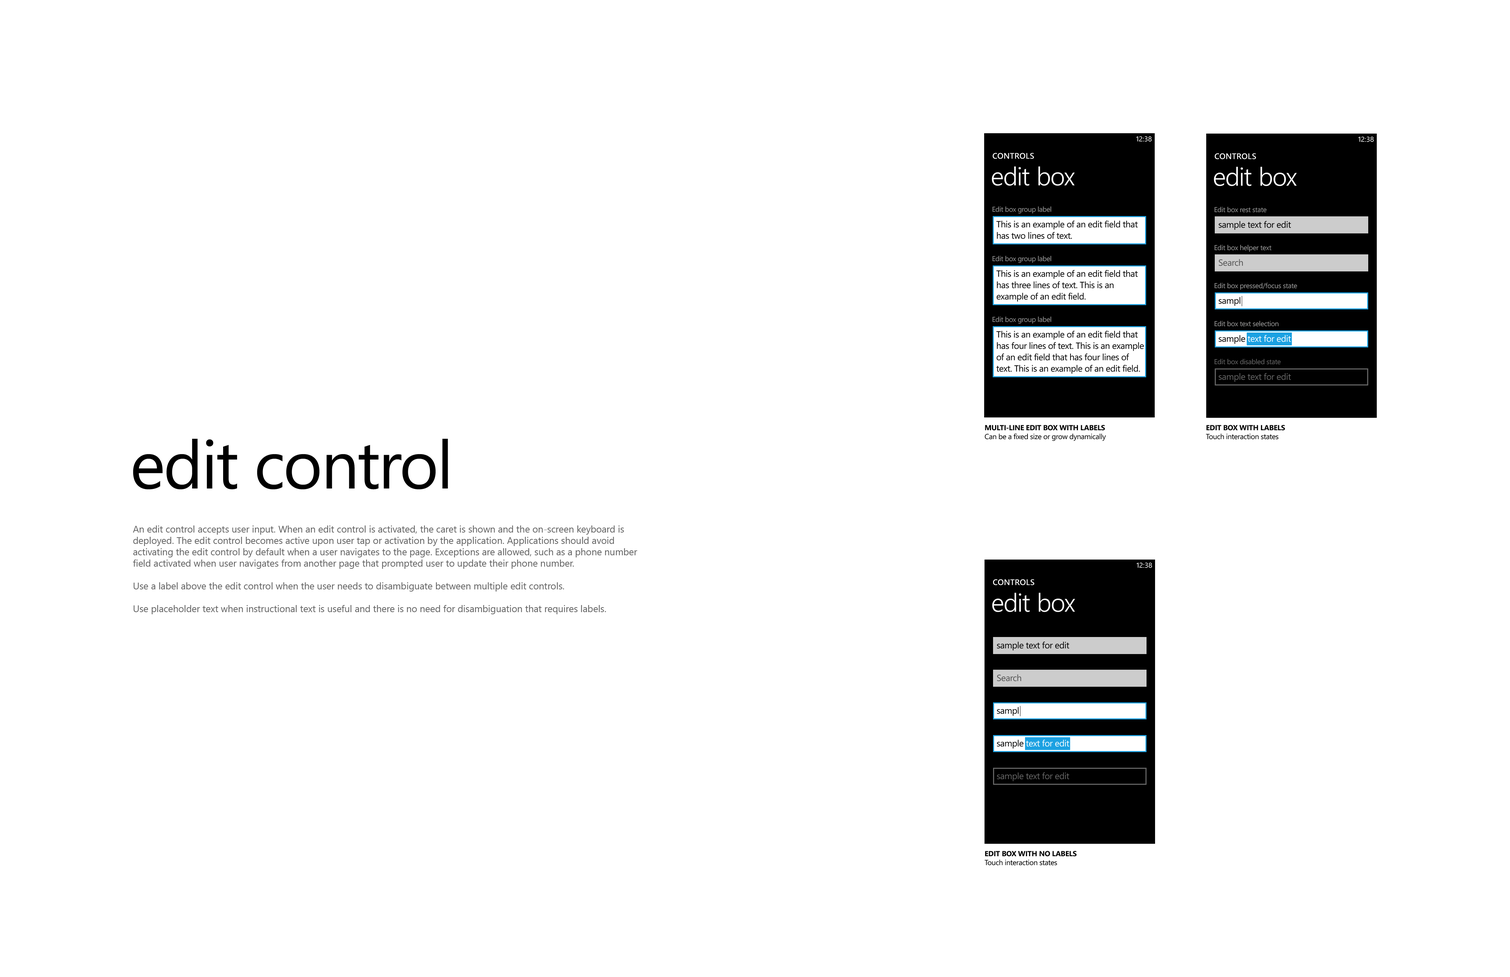
<style>
.page{position:relative;width:1510px;height:977px;background:#ffffff}
.page>*{position:absolute;margin:0}
.t1{font:7.1px "SegoeWP";color:#ffffff}
.t2{font:8.1px "SegoeWP-Semibold";letter-spacing:0.025em;color:#ffffff;text-transform:uppercase}
.t3{font:25.6px "SegoeWP-SemiLight";letter-spacing:-0.01em;color:#ffffff}
.t4{font:7.1px "SegoeWP";letter-spacing:-0.025em;color:#999999}
.t5{font:9px/11.4px "SegoeWP";letter-spacing:-0.025em;color:#000000}
.t6{font:9px "SegoeWP";letter-spacing:-0.025em;color:#000000}
.t7{font:9px "SegoeWP";letter-spacing:-0.025em;color:#525252}
.t8{font:9px "SegoeWP";letter-spacing:-0.025em;color:#ffffff}
.t9{font:7.1px "SegoeWP";letter-spacing:-0.025em;color:#666666}
.t10{font:9px "SegoeWP";letter-spacing:-0.025em;color:#666666}
.t11{font:7.4px "SegoeWP";letter-spacing:-0.025em;color:#000000}
.t12{font:7.4px "SegoeWP-Bold";letter-spacing:-0.025em;color:#000000;text-transform:uppercase}
.t13{font:67.3px "SegoeWP";letter-spacing:-0.025em;color:#000000}
.t14{font:9.5px "SegoeUI";color:#666666}
</style>
<div class="page">
<p class="t1" style="left:1136px;top:136px;width:16px;height:6px">12:38</p>
<p class="t1" style="left:1358px;top:136px;width:16px;height:6px">12:38</p>
<p class="t2" style="left:993px;top:153px;width:41px;height:6px">controls</p>
<p class="t2" style="left:1215px;top:153px;width:41px;height:6px">controls</p>
<p class="t3" style="left:992px;top:166px;width:83px;height:20px">edit box</p>
<p class="t3" style="left:1214px;top:167px;width:83px;height:19px">edit box</p>
<p class="t4" style="left:992px;top:206px;width:59px;height:8px">Edit box group label</p>
<p class="t4" style="left:1214px;top:207px;width:53px;height:5px">Edit box rest state</p>
<p class="t5" style="left:996px;top:221px;width:142px;height:18px">This is an example of an edit field that<br>has two lines of text.</p>
<p class="t6" style="left:1219px;top:221px;width:72px;height:9px">sample text for edit</p>
<p class="t4" style="left:1214px;top:245px;width:57px;height:7px">Edit box helper text</p>
<p class="t4" style="left:992px;top:256px;width:59px;height:7px">Edit box group label</p>
<p class="t7" style="left:1219px;top:259px;width:24px;height:7px">Search</p>
<p class="t5" style="left:996px;top:270px;width:142px;height:32px">This is an example of an edit field that<br>has three lines of text. This is an<br>example of an edit field.</p>
<p class="t4" style="left:1214px;top:282px;width:83px;height:8px">Edit box pressed/focus state</p>
<p class="t6" style="left:1219px;top:297px;width:21px;height:9px">sampl</p>
<p class="t4" style="left:992px;top:317px;width:59px;height:7px">Edit box group label</p>
<p class="t4" style="left:1214px;top:321px;width:65px;height:5px">Edit box text selection</p>
<p class="t5" style="left:996px;top:331px;width:148px;height:43px">This is an example of an edit field that<br>has four lines of text. This is an example<br>of an edit field that has four lines of<br>text. This is an example of an edit field.</p>
<p class="t8" style="left:1219px;top:335px;width:72px;height:9px"><span class="t6">sample </span>text for edit</p>
<p class="t9" style="left:1214px;top:359px;width:67px;height:6px">Edit box disabled state</p>
<p class="t10" style="left:1219px;top:373px;width:72px;height:9px">sample text for edit</p>
<p class="t11" style="left:984px;top:425px;width:122px;height:16px"><span class="t12">multi-line edit box with labels<br></span>Can be a fixed size or grow dynamically</p>
<p class="t11" style="left:1206px;top:425px;width:79px;height:14px"><span class="t12">edit box with labels<br></span>Touch interaction states</p>
<p class="t13" style="left:133px;top:439px;width:315px;height:51px">edit control</p>
<p class="t14" style="left:133px;top:525px;width:504px;height:89px">An edit control accepts user input. When an edit control is activated, the caret is shown and the on-screen keyboard is deployed. The edit control becomes active upon user tap or activation by the application. Applications should avoid activating the edit control by default when a user navigates to the page. Exceptions are allowed, such as a phone number field activated when user navigates from another page that prompted user to update their phone number.<br><br>Use a label above the edit control when the user needs to disambiguate between multiple edit controls.<br><br>Use placeholder text when instructional text is useful and there is no need for disambiguation that requires labels.</p>
<p class="t1" style="left:1136px;top:562px;width:16px;height:6px">12:38</p>
<p class="t2" style="left:993px;top:579px;width:41px;height:6px">controls</p>
<p class="t3" style="left:992px;top:593px;width:83px;height:19px">edit box</p>
<p class="t6" style="left:997px;top:642px;width:72px;height:8px">sample text for edit</p>
<p class="t7" style="left:997px;top:674px;width:24px;height:7px">Search</p>
<p class="t6" style="left:997px;top:707px;width:22px;height:9px">sampl</p>
<p class="t8" style="left:997px;top:740px;width:72px;height:9px"><span class="t6">sample </span>text for edit</p>
<p class="t10" style="left:997px;top:772px;width:72px;height:9px">sample text for edit</p>
<p class="t11" style="left:984px;top:851px;width:92px;height:14px"><span class="t12">edit box with no labels<br></span>Touch interaction states</p>
</div>
